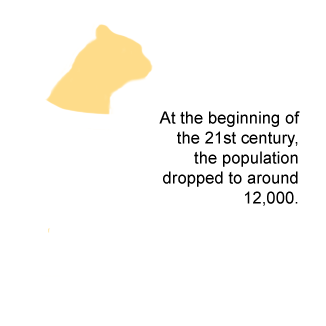
<style>
.page{position:relative;width:326px;height:326px;background:#ffffff}
.page>*{position:absolute;margin:0}
.t1{font:16.7px "ArialMT";color:#000000}
</style>
<div class="page">
<p class="t1" style="left:159px;top:111px;width:141px;height:95px;text-align:right">At the beginning of<br>the 21st century,<br>the population<br>dropped to around<br>12,000.</p>
</div>
